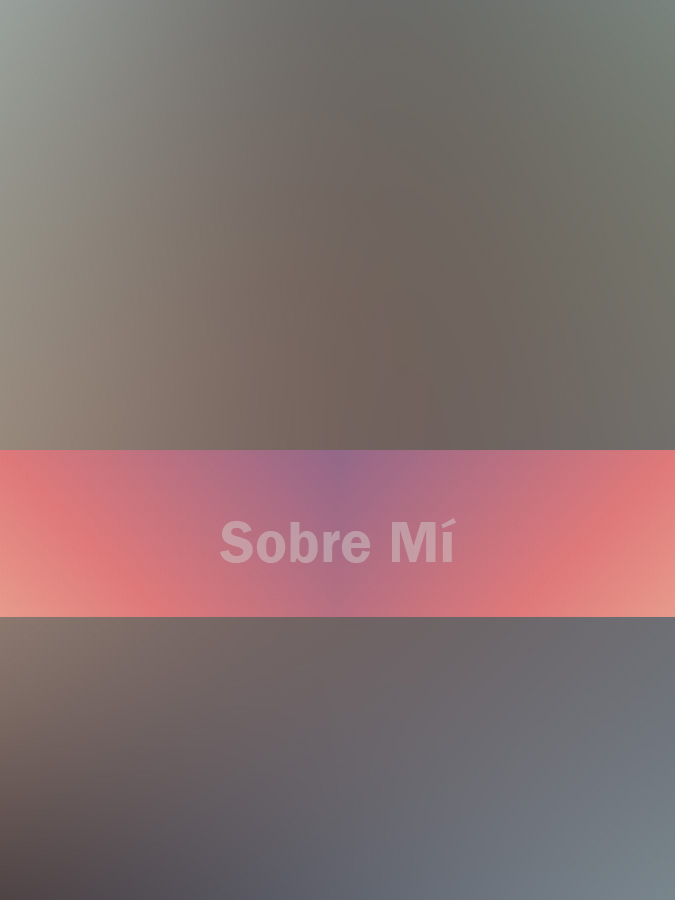
<style>
.page{position:relative;width:675px;height:900px}
.page>*{position:absolute;margin:0}
.t1{font:60px "FranklinGothic-Demi";color:#c49ba5}
</style>
<div class="page">
<p class="t1" style="left:220px;top:518px;width:236px;height:45px">Sobre Mí</p>
</div>
